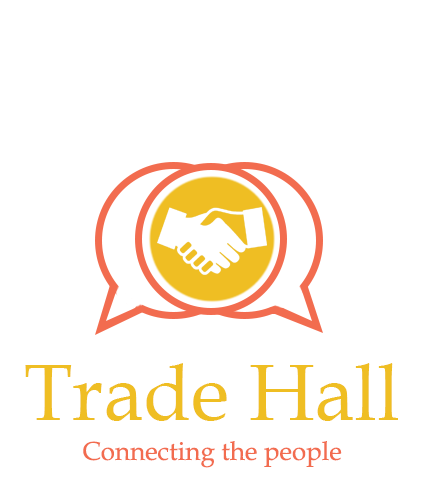
<style>
.page{position:relative;width:423px;height:500px;background:#ffffff}
.page>*{position:absolute;margin:0}
.t1{font:79px "BookAntiqua";color:#efbe23}
.t2{font:26px "BookAntiqua";color:#f26c4f}
</style>
<div class="page">
<p class="t1" style="left:25px;top:363px;width:373px;height:58px">Trade Hall</p>
<p class="t2" style="left:83px;top:441px;width:259px;height:27px">Connecting the people</p>
</div>
